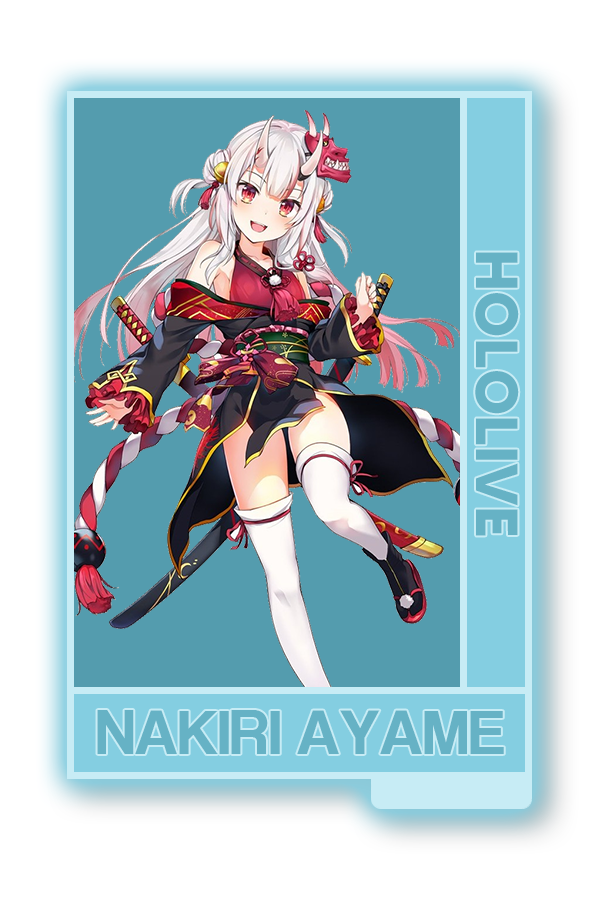
<style>
.page{position:relative;width:600px;height:900px;background:#ffffff}
.page>*{position:absolute;margin:0}
.t1{font:59.2px "MADETOMMY-Bold";color:#66b2c5}
.t2{font:66.4px "CoolveticaRg-Regular";color:#66b2c5}
</style>
<div class="page">
<p class="t1" style="left:475px;top:252px;width:44px;height:284px;rotate:90deg">HOLOLIVE</p>
<p class="t2" style="left:97px;top:710px;width:407px;height:44px">NAKIRI AYAME</p>
</div>
